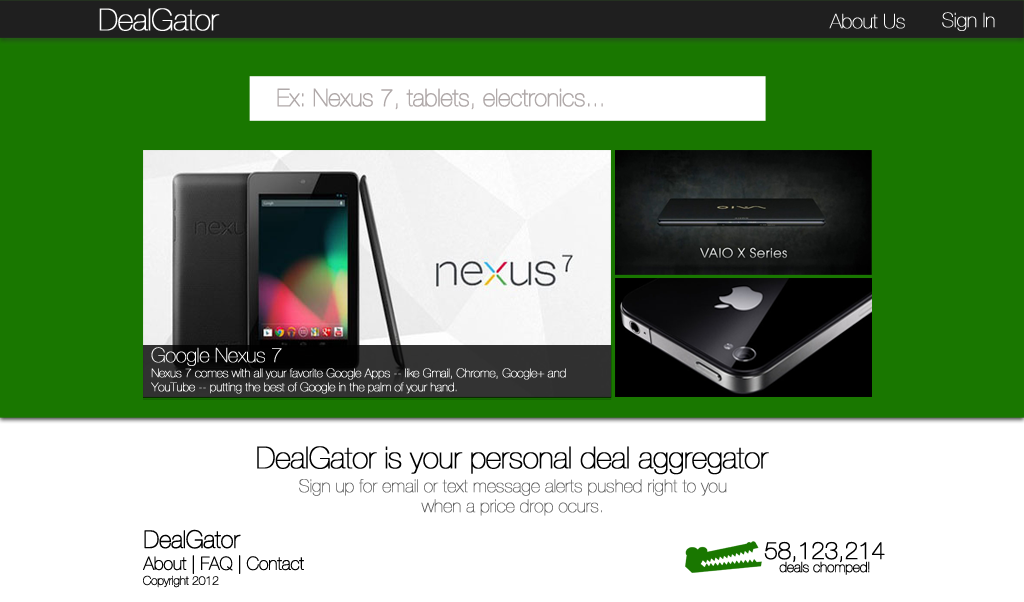
<style>
.page{position:relative;width:1024px;height:602px;background:#ffffff}
.page>*{position:absolute;margin:0}
.t1{font:30px "HelveticaNeue-UltraLight";letter-spacing:-0.025em;color:#ffffff;font-weight:bold}
.t2{font:20px "HelveticaNeue-UltraLight";letter-spacing:-0.025em;color:#ffffff;font-weight:bold}
.t3{font:24px "HelveticaNeue-UltraLight";letter-spacing:-0.025em;color:#b0a9a9;font-weight:bold}
.t4{font:12px "HelveticaNeue-UltraLight";letter-spacing:-0.025em;color:#ffffff;font-weight:bold}
.t5{font:30px "HelveticaNeue-UltraLight";letter-spacing:-0.025em;color:#000000;font-weight:bold}
.t6{font:18px/20px "HelveticaNeue-UltraLight";letter-spacing:-0.025em;color:#5b5b5b;font-weight:bold}
.t7{font:24px "HelveticaNeue-UltraLight";letter-spacing:-0.025em;color:#000000;font-weight:bold}
.t8{font:18px "HelveticaNeue-UltraLight";letter-spacing:-0.025em;color:#000000;font-weight:bold}
.t9{font:14px "HelveticaNeue-UltraLight";letter-spacing:-0.025em;color:#000000;font-weight:bold}
.t10{font:12px "HelveticaNeue-UltraLight";letter-spacing:-0.025em;color:#000000;font-weight:bold}
</style>
<div class="page">
<p class="t1" style="left:99px;top:8px;width:121px;height:23px">DealGator</p>
<p class="t2" style="left:829px;top:13px;width:76px;height:16px">About Us</p>
<p class="t2" style="left:942px;top:12px;width:53px;height:19px">Sign In</p>
<p class="t3" style="left:277px;top:88px;width:326px;height:22px">Ex: Nexus 7, tablets, electronics...</p>
<p class="t2" style="left:151px;top:347px;width:131px;height:19px">Google Nexus 7</p>
<p class="t4" style="left:151px;top:368px;width:415px;height:12px">Nexus 7 comes with all your favorite Google Apps -- like Gmail, Chrome, Google+ and</p>
<p class="t4" style="left:151px;top:382px;width:306px;height:12px">YouTube -- putting the best of Google in the palm of your hand.</p>
<p class="t5" style="left:257px;top:446px;width:512px;height:29px">DealGator is your personal deal aggregator</p>
<p class="t6" style="left:299px;top:479px;width:428px;height:37px;text-align:center">Sign up for email or text message alerts pushed right to you<br>when a price drop ocurs.</p>
<p class="t7" style="left:144px;top:529px;width:97px;height:20px">DealGator</p>
<p class="t7" style="left:764px;top:541px;width:121px;height:22px">58,123,214</p>
<p class="t8" style="left:143px;top:555px;width:161px;height:19px">About | FAQ | Contact</p>
<p class="t9" style="left:779px;top:561px;width:91px;height:14px">deals chomped!</p>
<p class="t10" style="left:143px;top:575px;width:76px;height:13px">Copyright 2012</p>
</div>
